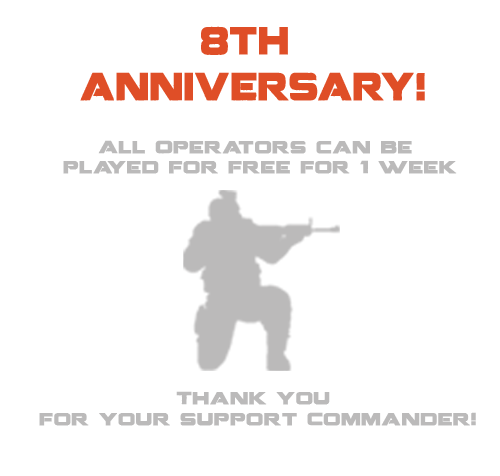
<style>
.page{position:relative;width:500px;height:476px;background:#ffffff}
.page>*{position:absolute;margin:0}
.t1{font:38.3px/45.6px "Coalition";letter-spacing:0.04em;color:#df4e27;font-weight:bold;scale:0.8 1}
.t2{font:17.2px "Coalition";letter-spacing:0.04em;color:#bbbaba;font-weight:bold}
.t3{font:17.2px/20.6px "Coalition";letter-spacing:0.04em;color:#bbbaba;font-weight:bold}
</style>
<div class="page">
<p class="t1" style="left:80px;top:26px;width:345px;height:75px;text-align:center">8th <br>ANNIVERSARY!</p>
<p class="t2" style="left:63px;top:140px;width:394px;height:34px;text-align:center">All Operators can be <br>played for free for 1 week</p>
<p class="t3" style="left:39px;top:391px;width:437px;height:35px;text-align:center">Thank you <br>for your support Commander!</p>
</div>
